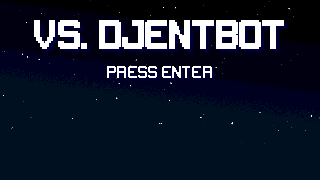
<style>
.page{position:relative;width:320px;height:180px;background:#001020}
.page>*{position:absolute;margin:0}
.t1{font:31.2px "Gameplay";color:#ffffff;text-transform:uppercase}
.t2{font:13.5px "Gameplay";color:#ffffff;text-transform:uppercase}
</style>
<div class="page">
<p class="t1" style="left:34px;top:20px;width:250px;height:29px">VS. DJENTBOT</p>
<p class="t2" style="left:107px;top:66px;width:105px;height:12px">press enter</p>
</div>
